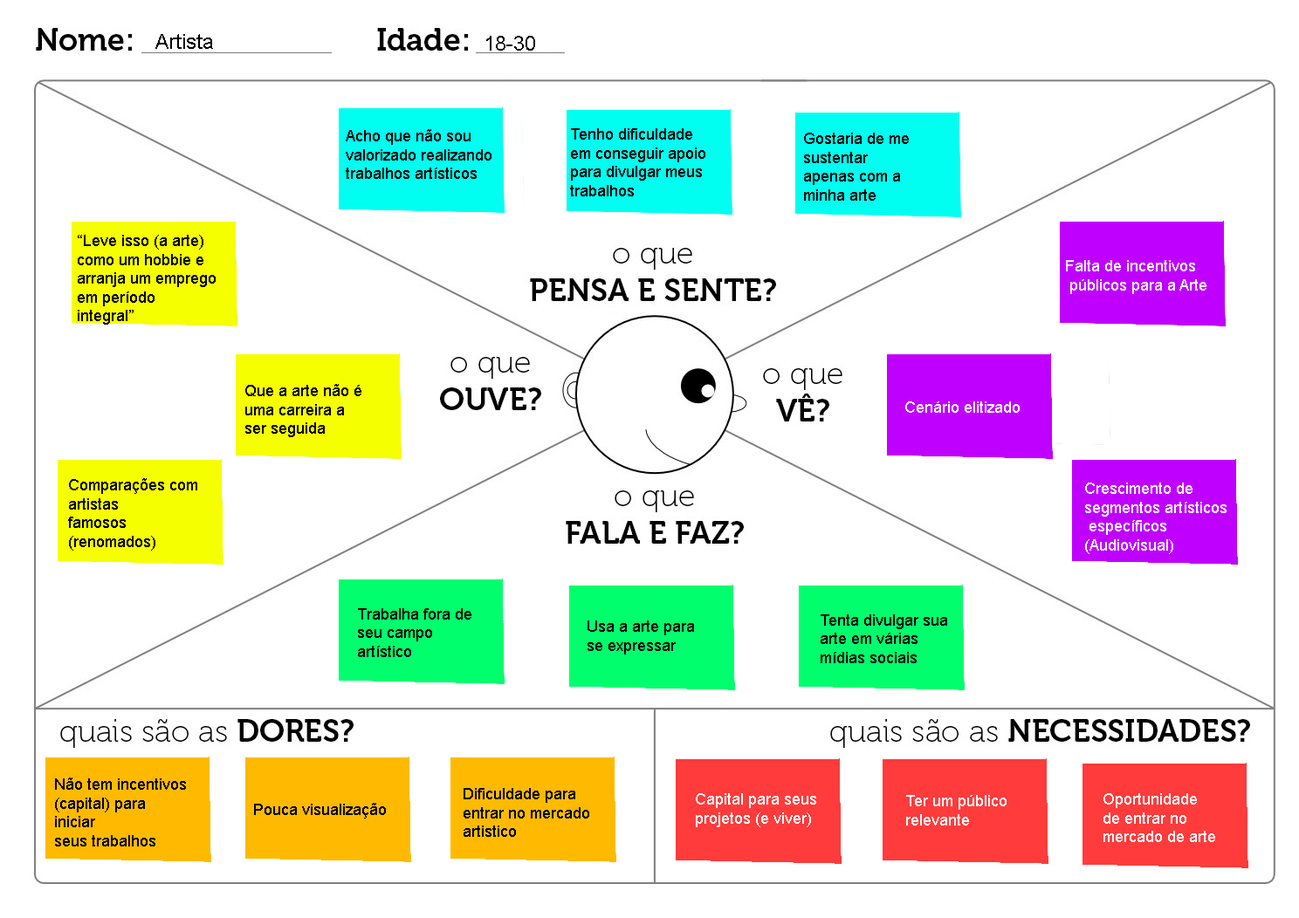
<style>
.page{position:relative;width:1299px;height:918px;background:#ffffff}
.page>*{position:absolute;margin:0}
.t1{font:20.9px "ArialMT";color:#000000}
.t2{font:15.7px "ArialMT";color:#000000}
.t3{font:15.7px "ArialMT";color:#ffffff}
</style>
<div class="page">
<p class="t1" style="left:155px;top:34px;width:58px;height:15px">Artista</p>
<p class="t1" style="left:486px;top:36px;width:49px;height:15px">18-30</p>
<p class="t2" style="left:346px;top:129px;width:145px;height:50px">Acho que não sou <br>valorizado realizando <br>trabalhos artísticos</p>
<p class="t2" style="left:570px;top:128px;width:135px;height:68px">Tenho dificuldade <br>em conseguir apoio <br>para divulgar meus <br>trabalhos</p>
<p class="t2" style="left:804px;top:133px;width:105px;height:68px">Gostaria de me <br>sustentar <br>apenas com a <br>minha arte</p>
<p class="t2" style="left:78px;top:235px;width:138px;height:90px">“Leve isso (a arte)<br>como um hobbie e <br>arranja um emprego<br>em período <br>integral”</p>
<p class="t3" style="left:1066px;top:260px;width:140px;height:34px">Falta de incentivos<br> públicos para a Arte</p>
<p class="t2" style="left:245px;top:384px;width:116px;height:53px">Que a arte não é <br>uma carreira a<br>ser seguida</p>
<p class="t3" style="left:905px;top:401px;width:114px;height:12px">Cenário elitizado</p>
<p class="t2" style="left:68px;top:478px;width:129px;height:73px">Comparações com <br>artistas <br>famosos <br>(renomados)</p>
<p class="t3" style="left:1085px;top:483px;width:141px;height:71px">Crescimento de <br>segmentos artísticos<br> específicos <br>(Audiovisual)</p>
<p class="t2" style="left:358px;top:608px;width:113px;height:49px">Trabalha fora de<br>seu campo <br>artístico</p>
<p class="t2" style="left:820px;top:614px;width:127px;height:49px">Tenta divulgar sua<br>arte em várias <br>mídias sociais</p>
<p class="t2" style="left:587px;top:621px;width:107px;height:34px">Usa a arte para <br>se expressar</p>
<p class="t2" style="left:55px;top:778px;width:131px;height:69px">Não tem incentivos<br>(capital) para <br>iniciar<br>seus trabalhos</p>
<p class="t2" style="left:463px;top:788px;width:126px;height:49px">Dificuldade para <br>entrar no mercado<br>artistico</p>
<p class="t3" style="left:696px;top:793px;width:120px;height:34px">Capital para seus <br>projetos (e viver)</p>
<p class="t3" style="left:906px;top:795px;width:100px;height:31px">Ter um público <br>relevante</p>
<p class="t3" style="left:1103px;top:793px;width:112px;height:49px">Oportunidade<br>de entrar no<br>mercado de arte</p>
<p class="t2" style="left:254px;top:803px;width:132px;height:16px">Pouca visualização</p>
</div>
